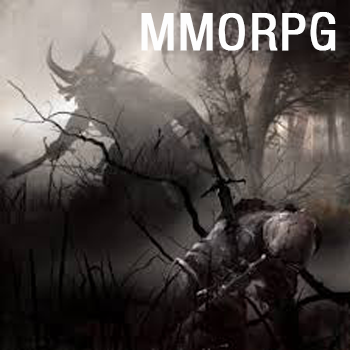
<style>
.page{position:relative;width:350px;height:350px}
.page>*{position:absolute;margin:0}
.t1{font:45.7px "MoeumTR-HM";color:#fdfdfd;font-weight:bold}
</style>
<div class="page">
<p class="t1" style="left:141px;top:12px;width:195px;height:39px">MMORPG</p>
</div>
